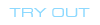
<style>
.page{position:relative;width:100px;height:25px;background:#ffffff}
.page>*{position:absolute;margin:0}
.t1{font:14px "MicrogrammaD-MediExte";letter-spacing:0.075em;color:#8dd9ff}
</style>
<div class="page">
<p class="t1" style="left:9px;top:8px;width:81px;height:9px">TRY OUT</p>
</div>
